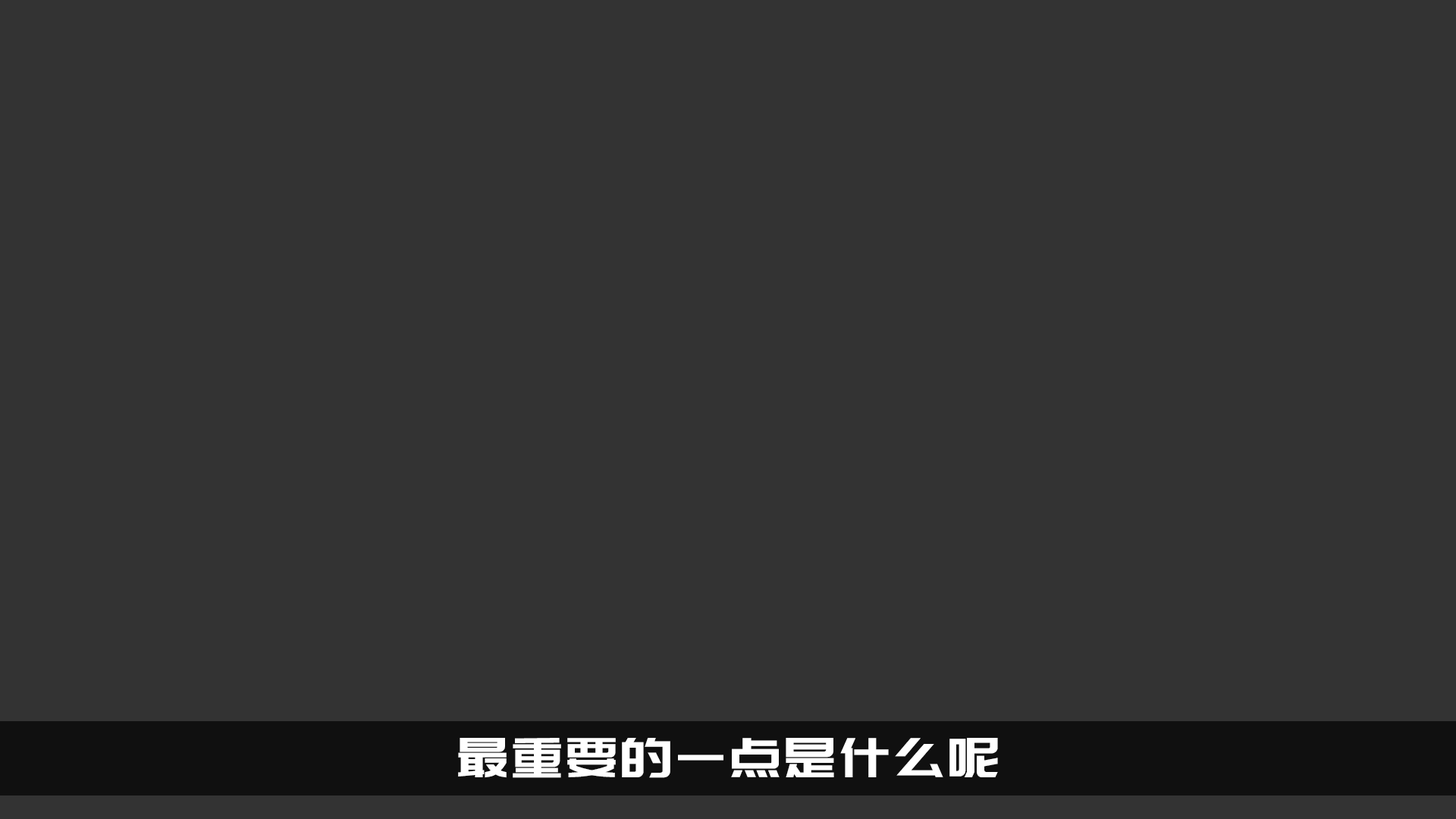
<style>
.page{position:relative;width:1456px;height:819px;background:#333333}
.page>*{position:absolute;margin:0}
.t1{font:54.6px "PangMenZhengDao-3";color:#ffffff}
</style>
<div class="page">
<p class="t1" style="left:458px;top:738px;width:540px;height:40px">最重要的一点是什么呢</p>
</div>
